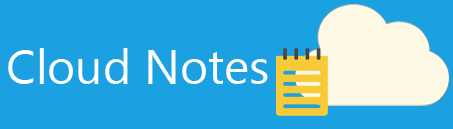
<style>
.page{position:relative;width:453px;height:129px;background:#1ba1e2}
.page>*{position:absolute;margin:0}
.t1{font:48px "SegoeUI";color:#ffffff}
</style>
<div class="page">
<p class="t1" style="left:8px;top:48px;width:260px;height:36px">Cloud Notes</p>
</div>
